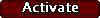
<style>
.page{position:relative;width:100px;height:18px;background:#690000}
.page>*{position:absolute;margin:0}
.t1{font:14px "MyanmarText";color:#fefefe;font-weight:bold}
</style>
<div class="page">
<p class="t1" style="left:22px;top:2px;width:56px;height:10px">Activate</p>
</div>
